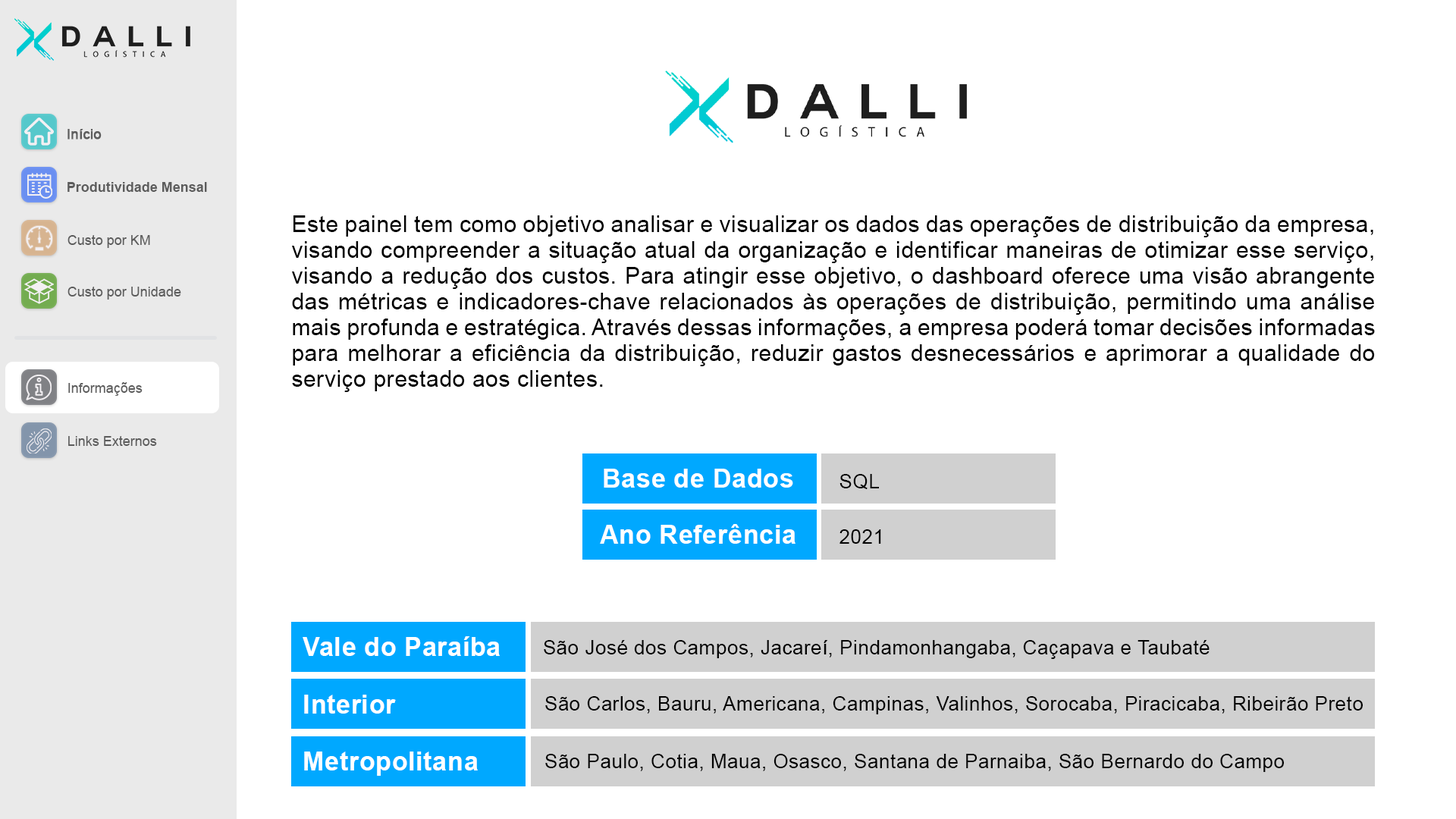
<style>
.page{position:relative;width:1456px;height:819px;background:#ffffff}
.page>*{position:absolute;margin:0}
.t1{font:13.6px "ArialMT";color:#5d5d5d;font-weight:bold}
.t2{font:13.6px "Arial-BoldMT";color:#5d5d5d}
.t3{font:22.7px/25.8px "ArialMT";letter-spacing:0.02em;color:#000000}
.t4{font:13.6px "ArialMT";color:#5d5d5d}
.t5{font:25.8px "Arial-BoldMT";letter-spacing:0.02em;color:#ffffff}
.t6{font:19.7px "ArialMT";letter-spacing:0.02em;color:#030303}
</style>
<div class="page">
<p class="t1" style="left:67px;top:129px;width:35px;height:11px">Início</p>
<p class="t2" style="left:67px;top:182px;width:140px;height:10px">Produtividade Mensal</p>
<p class="t3" style="left:292px;top:215px;width:1083px;height:177px;text-align:justify">Este painel tem como objetivo analisar e visualizar os dados das operações de distribuição da empresa, visando compreender a situação atual da organização e identificar maneiras de otimizar esse serviço, visando a redução dos custos. Para atingir esse objetivo, o dashboard oferece uma visão abrangente das métricas e indicadores-chave relacionados às operações de distribuição, permitindo uma análise mais profunda e estratégica. Através dessas informações, a empresa poderá tomar decisões informadas para melhorar a eficiência da distribuição, reduzir gastos desnecessários e aprimorar a qualidade do serviço prestado aos clientes.</p>
<p class="t4" style="left:67px;top:235px;width:83px;height:13px">Custo por KM</p>
<p class="t4" style="left:67px;top:287px;width:114px;height:13px">Custo por Unidade</p>
<p class="t4" style="left:68px;top:382px;width:75px;height:14px">Informações</p>
<p class="t4" style="left:68px;top:436px;width:89px;height:10px">Links Externos</p>
<p class="t5" style="left:604px;top:469px;width:189px;height:19px">Base de Dados</p>
<p class="t6" style="left:839px;top:474px;width:40px;height:15px">SQL</p>
<p class="t5" style="left:600px;top:524px;width:195px;height:20px">Ano Referência</p>
<p class="t6" style="left:839px;top:529px;width:42px;height:15px">2021</p>
<p class="t5" style="left:303px;top:636px;width:197px;height:20px">Vale do Paraíba</p>
<p class="t6" style="left:544px;top:640px;width:666px;height:19px">São José dos Campos, Jacareí, Pindamonhangaba, Caçapava e Taubaté</p>
<p class="t5" style="left:304px;top:695px;width:92px;height:19px">Interior</p>
<p class="t6" style="left:545px;top:696px;width:818px;height:18px">São Carlos, Bauru, Americana, Campinas, Valinhos, Sorocaba, Piracicaba, Ribeirão Preto</p>
<p class="t5" style="left:304px;top:751px;width:174px;height:25px">Metropolitana</p>
<p class="t6" style="left:545px;top:754px;width:739px;height:18px">São Paulo, Cotia, Maua, Osasco, Santana de Parnaiba, São Bernardo do Campo</p>
</div>
